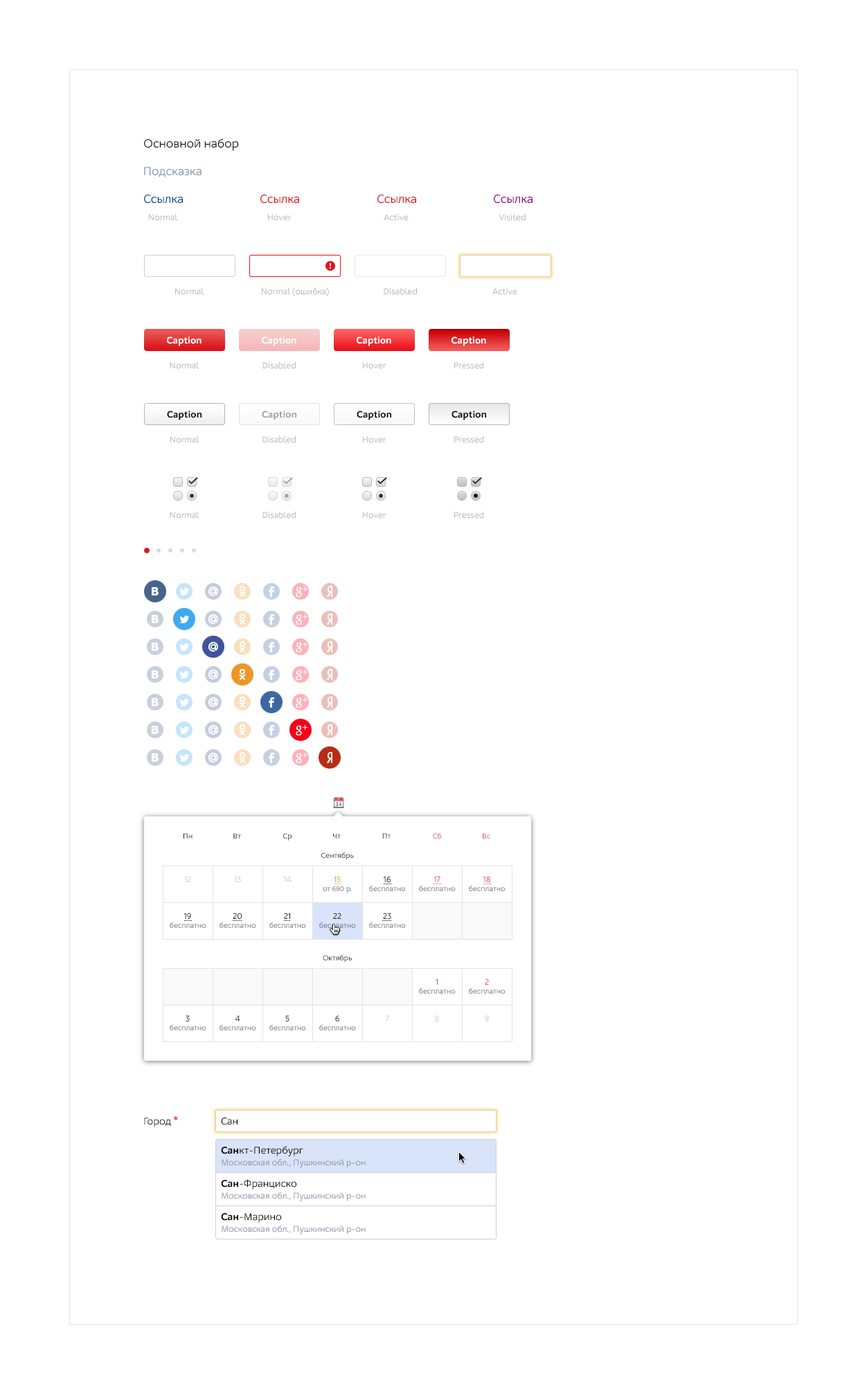
<style>
.page{position:relative;width:867px;height:1380px;background:#ffffff}
.page>*{position:absolute;margin:0}
.t1{font:12.5px "M.Video-Regular";color:#1b1b1b}
.t2{font:12.5px "M.Video-Regular";color:#8c99aa}
.t3{font:12.5px "M.Video-Regular";color:#004b8c}
.t4{font:12.5px "M.Video-Regular";color:#db151c}
.t5{font:12.5px "M.Video-Regular";color:#8c0077}
.t6{font:9px "M.Video-Regular";color:#b8b8b8}
.t7{font:9.7px "M.Video-Bold";color:#ffffff}
.t8{font:9.7px "M.Video-Bold";color:#000000}
.t9{font:9.7px "M.Video-Bold";color:#999999}
.t10{font:7.6px "M.Video-Regular";color:#1b1b1b}
.t11{font:7.6px "M.Video-Regular"}
.t12{font:7.6px "M.Video-Regular";color:#df4e51}
.t13{font:7.6px/9px "M.Video-Regular";color:#626773}
.t14{font:9px/27.7px "M.Video-Regular";color:#c8d1de}
.t15{font:9px/27.7px "M.Video-Regular";color:#1b1b1b}
.t16{font:9px/27.7px "M.Video-Regular";color:#ff953c}
.t17{font:7.6px/9px "M.Video-Regular";color:#1b1b1b}
.t18{font:7.6px/9px "M.Video-Regular"}
.t19{font:9px/27.7px "M.Video-Regular"}
.t20{font:9px/27.7px "M.Video-Regular";color:#df4e51}
.t21{font:9px "M.Video-Regular";color:#c8d1de}
.t22{font:9px "M.Video-Regular";color:#1b1b1b}
.t23{font:10.4px "M.Video-Regular";color:#1b1b1b}
.t24{font:10.4px "M.Video-Bold";color:#1b1b1b}
.t25{font:10.4px "M.Video-Regular";color:#000000}
.t26{font:9px/11.8px "M.Video-Regular";color:#8c99aa}
.t27{font:10.4px/9px "M.Video-Bold";color:#000000}
.t28{font:10.4px/9px "M.Video-Regular";color:#000000}
</style>
<div class="page">
<p class="t1" style="left:144px;top:138px;width:95px;height:13px">Основной набор</p>
<p class="t2" style="left:144px;top:167px;width:57px;height:10px">Подсказка</p>
<p class="t3" style="left:144px;top:195px;width:39px;height:9px">Ссылка</p>
<p class="t4" style="left:260px;top:195px;width:39px;height:9px">Ссылка</p>
<p class="t4" style="left:377px;top:195px;width:39px;height:9px">Ссылка</p>
<p class="t5" style="left:494px;top:195px;width:38px;height:9px">Ссылка</p>
<p class="t6" style="left:149px;top:213px;width:29px;height:8px">Normal</p>
<p class="t6" style="left:268px;top:214px;width:23px;height:7px">Hover</p>
<p class="t6" style="left:384px;top:214px;width:24px;height:7px">Active</p>
<p class="t6" style="left:498px;top:213px;width:27px;height:8px">Visited</p>
<p class="t6" style="left:175px;top:287px;width:29px;height:8px">Normal</p>
<p class="t6" style="left:262px;top:287px;width:67px;height:9px">Normal (ошибка)</p>
<p class="t6" style="left:384px;top:287px;width:33px;height:8px">Disabled</p>
<p class="t6" style="left:492px;top:288px;width:25px;height:7px">Active</p>
<p class="t7" style="left:167px;top:336px;width:34px;height:10px">Caption</p>
<p class="t7" style="left:262px;top:336px;width:34px;height:10px">Caption</p>
<p class="t7" style="left:357px;top:336px;width:34px;height:10px">Caption</p>
<p class="t7" style="left:451px;top:336px;width:35px;height:10px">Caption</p>
<p class="t6" style="left:170px;top:361px;width:29px;height:8px">Normal</p>
<p class="t6" style="left:262px;top:361px;width:34px;height:8px">Disabled</p>
<p class="t6" style="left:363px;top:362px;width:23px;height:7px">Hover</p>
<p class="t6" style="left:454px;top:361px;width:30px;height:8px">Pressed</p>
<p class="t8" style="left:167px;top:411px;width:34px;height:9px">Caption</p>
<p class="t9" style="left:262px;top:411px;width:34px;height:9px">Caption</p>
<p class="t8" style="left:357px;top:411px;width:34px;height:9px">Caption</p>
<p class="t8" style="left:451px;top:411px;width:35px;height:9px">Caption</p>
<p class="t6" style="left:170px;top:435px;width:29px;height:8px">Normal</p>
<p class="t6" style="left:262px;top:435px;width:34px;height:8px">Disabled</p>
<p class="t6" style="left:363px;top:436px;width:23px;height:7px">Hover</p>
<p class="t6" style="left:454px;top:435px;width:30px;height:8px">Pressed</p>
<p class="t6" style="left:170px;top:511px;width:29px;height:8px">Normal</p>
<p class="t6" style="left:262px;top:511px;width:34px;height:8px">Disabled</p>
<p class="t6" style="left:363px;top:512px;width:23px;height:7px">Hover</p>
<p class="t6" style="left:454px;top:511px;width:30px;height:8px">Pressed</p>
<p class="t10" style="left:183px;top:833px;width:9px;height:5px">Пн</p>
<p class="t11" style="left:233px;top:833px;width:8px;height:5px">Вт</p>
<p class="t10" style="left:283px;top:833px;width:8px;height:7px">Ср</p>
<p class="t10" style="left:333px;top:833px;width:8px;height:5px">Чт</p>
<p class="t11" style="left:382px;top:833px;width:9px;height:5px">Пт</p>
<p class="t12" style="left:433px;top:833px;width:8px;height:5px">Сб</p>
<p class="t12" style="left:483px;top:833px;width:7px;height:5px">Вс</p>
<p class="t10" style="left:321px;top:852px;width:33px;height:8px">Сентябрь</p>
<p class="t13" style="left:170px;top:876px;width:36px;height:52px;text-align:center"><span class="t14">12<br> <br></span><span class="t15">19<br></span>бесплатно</p>
<p class="t13" style="left:219px;top:876px;width:37px;height:52px;text-align:center"><span class="t14">13<br> <br></span><span class="t15">20<br></span>бесплатно</p>
<p class="t13" style="left:269px;top:876px;width:37px;height:52px;text-align:center"><span class="t14">14<br> <br></span><span class="t15">21<br></span>бесплатно</p>
<p class="t13" style="left:319px;top:876px;width:37px;height:52px;text-align:center"><span class="t16">15<br></span>от 690 р.<br><span class="t15">22<br></span>бесплатно</p>
<p class="t17" style="left:369px;top:876px;width:37px;height:52px;text-align:center"><span class="t15">16<br></span>бесплатно<br><span class="t15">23<br></span>бесплатно</p>
<p class="t18" style="left:419px;top:876px;width:37px;height:15px;text-align:center"><span class="t19">17<br></span>бесплатно</p>
<p class="t13" style="left:469px;top:876px;width:36px;height:15px;text-align:center"><span class="t20">18<br></span>бесплатно</p>
<p class="t10" style="left:323px;top:955px;width:29px;height:7px">Октябрь</p>
<p class="t13" style="left:419px;top:978px;width:37px;height:44px;text-align:center"><span class="t20">1<br></span>бесплатно<br><span class="t14">8</span></p>
<p class="t13" style="left:469px;top:978px;width:36px;height:44px;text-align:center"><span class="t20">2<br></span>бесплатно<br><span class="t14">9</span></p>
<p class="t17" style="left:170px;top:1015px;width:36px;height:15px;text-align:center"><span class="t15"> <br> <br></span><span class="t15">3<br></span>бесплатно</p>
<p class="t18" style="left:219px;top:1015px;width:37px;height:15px;text-align:center"><span class="t19"> <br> <br></span><span class="t19">4<br></span>бесплатно</p>
<p class="t18" style="left:269px;top:1015px;width:37px;height:15px;text-align:center"><span class="t19"> <br> <br></span><span class="t19">5<br></span>бесплатно</p>
<p class="t17" style="left:319px;top:1015px;width:37px;height:15px;text-align:center"><span class="t15"> <br> <br></span><span class="t15">6<br></span>бесплатно</p>
<p class="t21" style="left:385px;top:1015px;width:4px;height:6px"><span class="t22"> <br> <br></span>7</p>
<p class="t23" style="left:144px;top:1116px;width:34px;height:11px">Город <span class="t24">*</span></p>
<p class="t25" style="left:221px;top:1117px;width:16px;height:8px">Сан</p>
<p class="t26" style="left:221px;top:1146px;width:145px;height:22px"><span class="t27">Сан</span><span class="t28">кт-Петербург<br></span>Московская обл., Пушкинский р-он</p>
<p class="t26" style="left:221px;top:1179px;width:145px;height:22px"><span class="t27">Сан</span><span class="t28">-Франциско<br></span>Московская обл., Пушкинский р-он</p>
<p class="t26" style="left:221px;top:1213px;width:145px;height:21px"><span class="t27">Сан</span><span class="t28">-Марино<br></span>Московская обл., Пушкинский р-он</p>
</div>
